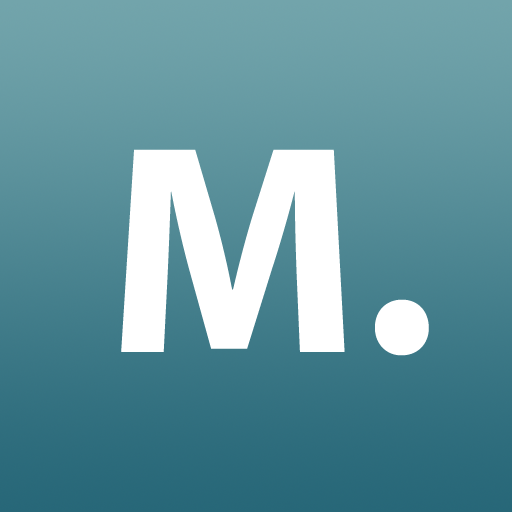
<style>
.page{position:relative;width:512px;height:512px}
.page>*{position:absolute;margin:0}
.t1{font:300px "MyriadPro-Bold";color:#ffffff}
</style>
<div class="page">
<p class="t1" style="left:121px;top:149px;width:308px;height:207px">M.</p>
</div>
